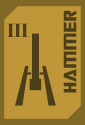
<style>
.page{position:relative;width:85px;height:125px;background:#bf9739}
.page>*{position:absolute;margin:0}
.t1{font:20px "TransformersMovie";letter-spacing:0.04em;color:#4c3f17}
.t2{font:20px "TransformersMovie";letter-spacing:0.06em;color:#4c3f17}
.t3{font:20px "TimesNewRomanPS-BoldMT";letter-spacing:-0.04em;color:#4c3f17}
</style>
<div class="page">
<p class="t1" style="left:63px;top:10px;width:14px;height:83px;rotate:-90deg">Ham<span class="t2">m</span>er</p>
<p class="t3" style="left:7px;top:23px;width:21px;height:14px">III</p>
</div>
